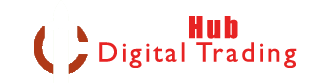
<style>
.page{position:relative;width:322px;height:84px;background:#ffffff}
.page>*{position:absolute;margin:0}
.t1{font:28px/23.3px "GillSansMT";letter-spacing:0.1em;color:#e72323}
.t2{font:28px/23.3px "Impact";letter-spacing:0.1em;color:#ffffff}
.t3{font:28px/23.3px "Impact";letter-spacing:0.1em;color:#e72323}
</style>
<div class="page">
<p class="t1" style="left:98px;top:16px;width:199px;height:52px"><span class="t2">Barter</span><span class="t3">Hub<br></span>Digital Trading</p>
</div>
